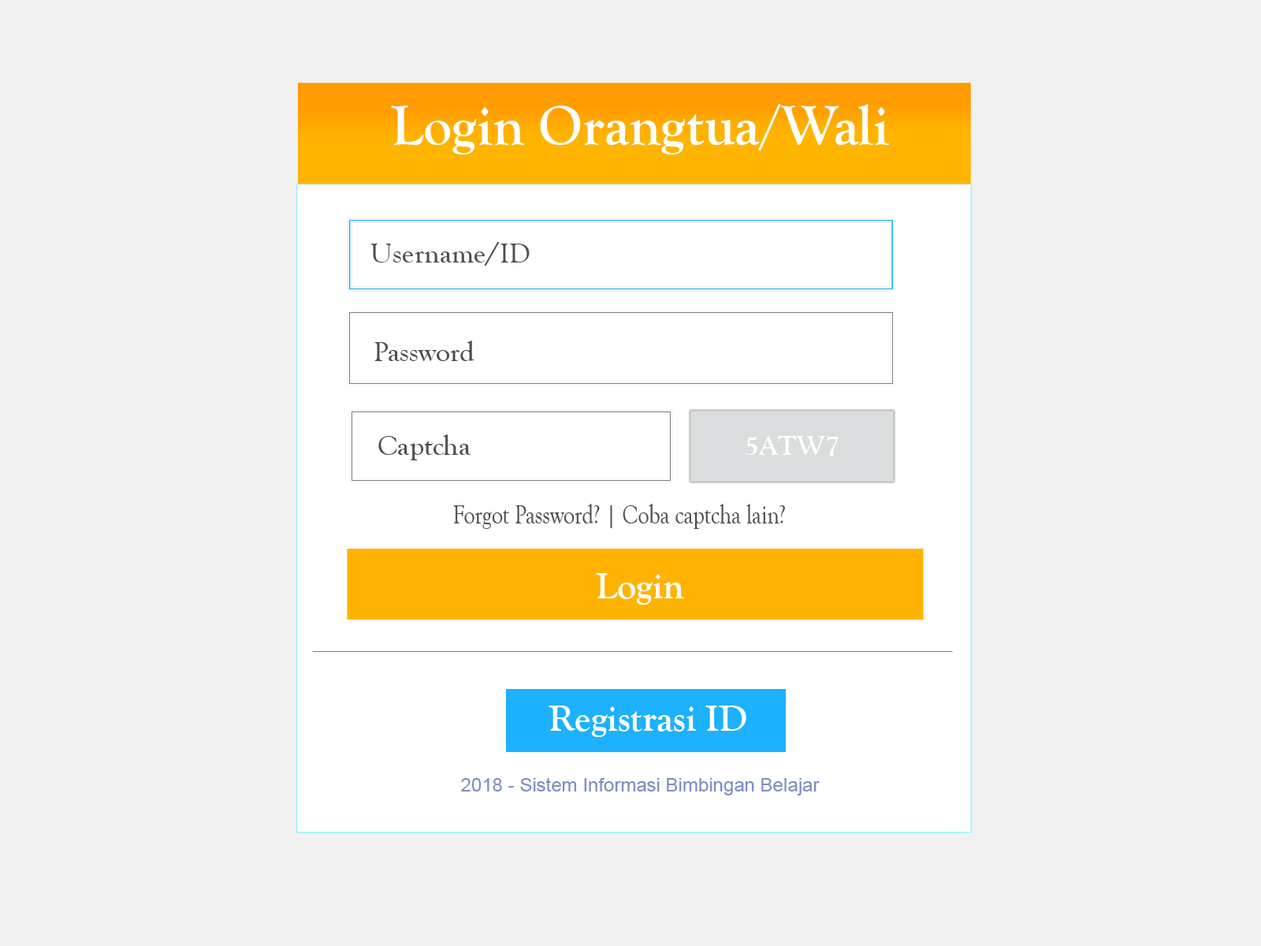
<style>
.page{position:relative;width:1261px;height:946px;background:#f2f1f1}
.page>*{position:absolute;margin:0}
.t1{font:56.7px "GoudyOldStyleT-Bold";color:#ffffff}
.t2{font:28.4px "GoudyOldStyleT-Regular";color:#4e4e4e}
.t3{font:28.4px "GoudyOldStyleT-Bold";color:#fffefe}
.t4{font:27.8px "GoudyOldStyleT-Regular";color:#4e4e4e;scale:0.79 1}
.t5{font:37.8px "GoudyOldStyleT-Bold";color:#ffffff}
.t6{font:18.9px "ArialMT";color:#7e8ec3}
</style>
<div class="page">
<p class="t1" style="left:391px;top:104px;width:498px;height:50px">Login Orangtua/Wali</p>
<p class="t2" style="left:370px;top:242px;width:160px;height:24px">Username/ID</p>
<p class="t2" style="left:374px;top:340px;width:100px;height:21px">Password</p>
<p class="t2" style="left:378px;top:434px;width:93px;height:26px">Captcha</p>
<p class="t3" style="left:746px;top:436px;width:92px;height:20px">5ATW7</p>
<p class="t4" style="left:453px;top:504px;width:332px;height:25px">Forgot Password? | Coba captcha lain?</p>
<p class="t5" style="left:596px;top:573px;width:88px;height:31px">Login</p>
<p class="t5" style="left:548px;top:705px;width:198px;height:32px">Registrasi ID</p>
<p class="t6" style="left:461px;top:777px;width:359px;height:18px">2018 - Sistem Informasi Bimbingan Belajar</p>
</div>
